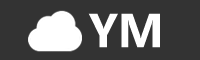
<style>
.page{position:relative;width:200px;height:60px;background:#333333}
.page>*{position:absolute;margin:0}
.t1{font:48px "SegoeUI-Bold";color:#ffffff}
</style>
<div class="page">
<p class="t1" style="left:88px;top:13px;width:72px;height:35px">YM</p>
</div>
